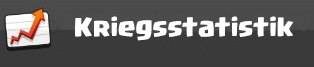
<style>
.page{position:relative;width:314px;height:67px;background:#3a3a3a}
.page>*{position:absolute;margin:0}
.t1{font:20px "Supercell-Magic";color:#ffffff}
</style>
<div class="page">
<p class="t1" style="left:75px;top:16px;width:219px;height:25px">Kriegsstatistik</p>
</div>
